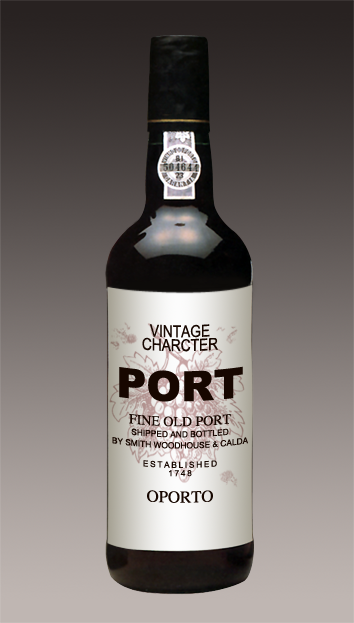
<style>
.page{position:relative;width:354px;height:623px}
.page>*{position:absolute;margin:0}
.t1{font:8.3px/11.1px "Helvetica";color:#170700}
.t2{font:16.7px/13.9px "ArialNarrow";color:#170700}
.t3{font:41.7px/50px "Arial-Black";color:#170700}
.t4{font:13.9px/25px "Times-Roman";color:#170700}
.t5{font:8.3px/8.3px "ArialMT";letter-spacing:0.2em;color:#170700}
.t6{font:16.7px/16.7px "Times-Roman";color:#170700}
</style>
<div class="page">
<p class="t1" style="left:112px;top:324px;width:136px;height:179px;text-align:center"><span class="t2">VINTAGE<br>CHARCTER<br></span><span class="t3">PORT<br></span><span class="t4">FINE OLD PORT<br></span>SHIPPED AND BOTTLED<br>BY SMITH WOODHOUSE &amp; CALDA<br><br><span class="t5">ESTABLISHED<br>1748<br></span><span class="t6">OPORTO</span></p>
</div>
